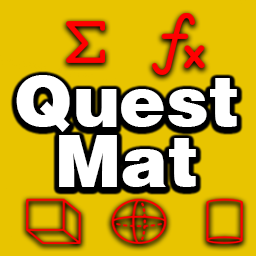
<style>
.page{position:relative;width:256px;height:256px;background:#e8c400}
.page>*{position:absolute;margin:0}
.t1{font:70px/60px "HelveticaBlack";color:#ffffff}
</style>
<div class="page">
<p class="t1" style="left:16px;top:75px;width:221px;height:112px;text-align:center">Quest<br>Mat</p>
</div>
